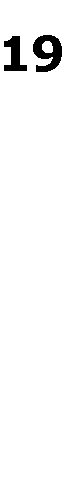
<style>
.page{position:relative;width:64px;height:500px;background:#ffffff}
.page>*{position:absolute;margin:0}
.t1{font:48px "Verdana-Bold";color:#000000}
</style>
<div class="page">
<p class="t1" style="left:4px;top:35px;width:58px;height:37px">19</p>
</div>
